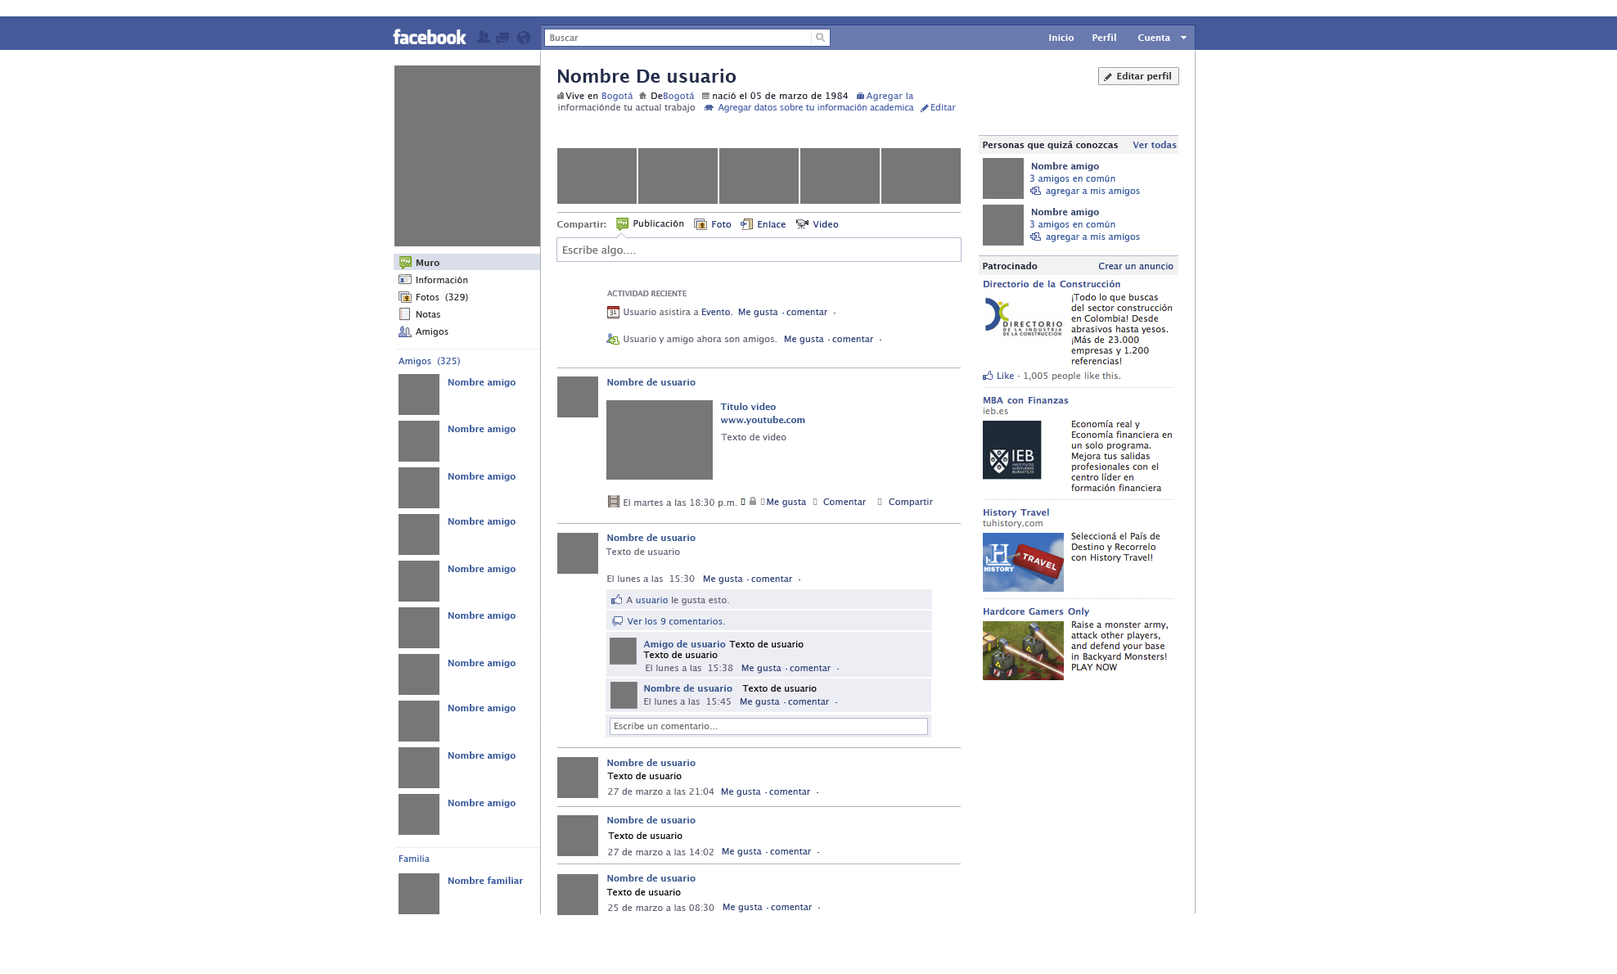
<style>
.page{position:relative;width:1617px;height:974px;background:#ffffff}
.page>*{position:absolute;margin:0}
.t1{font:9px "LucidaGrande";color:#777777}
.t2{font:9px "LucidaGrande-Bold";color:#ffffff}
.t3{font:18px "LucidaGrande-Bold";color:#242d49}
.t4{font:9px "LucidaGrande-Bold";color:#363636}
.t5{font:9.4px "LucidaGrande";color:#262a36}
.t6{font:9.4px "LucidaGrande";color:#5268ad}
.t7{font:8.6px "LucidaGrande";color:#5268ad}
.t8{font:9px "LucidaGrande";color:#666676}
.t9{font:9px "LucidaGrande";color:#5268ad}
.t10{font:9px "LucidaGrande-Bold";color:#252a38}
.t11{font:9px "LucidaGrande-Bold";color:#425694}
.t12{font:9px "LucidaGrande-Bold";color:#354370}
.t13{font:9px "LucidaGrande";color:#38599c}
.t14{font:9px "LucidaGrande-Bold";color:#34416a}
.t15{font:9px "LucidaGrande-Bold";color:#727272}
.t16{font:9.4px "LucidaGrande";color:#253976}
.t17{font:10.4px "LucidaGrande";color:#717171}
.t18{font:9px/17.2px "LucidaGrande";color:#333333}
.t19{font:9px/17.2px "LucidaGrande-Bold";color:#333333}
.t20{font:9px "LucidaGrande";color:#253976}
.t21{font:7.1px "LucidaGrande-Bold";color:#7c7c88}
.t22{font:9px "LucidaGrande";color:#38487b}
.t23{font:9px "LucidaGrande-Bold";color:#38599c}
.t24{font:9px "LucidaGrande-Bold";color:#37548d}
.t25{font:9px "LucidaGrande";color:#3e5c97}
.t26{font:9px "LucidaGrande";color:#060606}
.t27{font:8.9px "LucidaGrande";color:#717171}
</style>
<div class="page">
<p class="t1" style="left:550px;top:34px;width:28px;height:8px">Buscar</p>
<p class="t2" style="left:1049px;top:34px;width:25px;height:7px">Inicio</p>
<p class="t2" style="left:1092px;top:34px;width:24px;height:7px">Perfil</p>
<p class="t2" style="left:1137px;top:34px;width:33px;height:7px">Cuenta</p>
<p class="t3" style="left:558px;top:69px;width:178px;height:14px">Nombre De usuario</p>
<p class="t4" style="left:1117px;top:72px;width:54px;height:9px">Editar perfil</p>
<p class="t5" style="left:565px;top:92px;width:348px;height:9px">Vive en <span class="t6">Bogotá</span>      De<span class="t6">Bogotá </span>     nació el 05 de marzo de 1984      <span class="t6">Agregar la</span></p>
<p class="t7" style="left:558px;top:103px;width:398px;height:10px"><span class="t8">informaciónde tu actual trabajo        </span>Agregar datos sobre tu información academica      <span class="t9">Editar</span></p>
<p class="t10" style="left:983px;top:141px;width:194px;height:9px">Personas que quizá conozcas     <span class="t11">Ver todas</span></p>
<p class="t12" style="left:1031px;top:162px;width:68px;height:9px">Nombre amigo</p>
<p class="t13" style="left:1030px;top:174px;width:85px;height:10px">3 amigos en común</p>
<p class="t13" style="left:1046px;top:187px;width:94px;height:9px">agregar a mis amigos</p>
<p class="t14" style="left:1031px;top:208px;width:68px;height:9px">Nombre amigo</p>
<p class="t15" style="left:556px;top:221px;width:50px;height:8px">Compartir:</p>
<p class="t5" style="left:633px;top:219px;width:51px;height:8px">Publicación</p>
<p class="t16" style="left:712px;top:221px;width:19px;height:6px">Foto</p>
<p class="t16" style="left:758px;top:221px;width:27px;height:7px">Enlace</p>
<p class="t16" style="left:812px;top:220px;width:27px;height:7px">Video</p>
<p class="t13" style="left:1030px;top:220px;width:85px;height:10px">3 amigos en común</p>
<p class="t13" style="left:1046px;top:233px;width:94px;height:9px">agregar a mis amigos</p>
<p class="t17" style="left:563px;top:245px;width:73px;height:11px">Escribe algo....</p>
<p class="t18" style="left:416px;top:259px;width:52px;height:78px"><span class="t19"><br>Muro<br></span>Información<br>Fotos  (329)<br>Notas<br>Amigos</p>
<p class="t10" style="left:983px;top:262px;width:54px;height:7px">Patrocinado</p>
<p class="t20" style="left:1098px;top:263px;width:75px;height:7px">Crear un anuncio</p>
<p class="t21" style="left:607px;top:290px;width:79px;height:6px">ACTIVIDAD RECIENTE</p>
<p class="t8" style="left:623px;top:308px;width:109px;height:7px">Usuario asistira a <span class="t22">Evento.</span></p>
<p class="t22" style="left:738px;top:308px;width:90px;height:9px">Me gusta   comentar</p>
<p class="t8" style="left:623px;top:335px;width:153px;height:9px">Usuario y amigo ahora son amigos.</p>
<p class="t22" style="left:784px;top:335px;width:90px;height:9px">Me gusta   comentar</p>
<p class="t13" style="left:398px;top:357px;width:62px;height:10px">Amigos  (325)</p>
<p class="t23" style="left:448px;top:378px;width:67px;height:9px">Nombre amigo</p>
<p class="t24" style="left:607px;top:378px;width:88px;height:7px">Nombre de usuario</p>
<p class="t24" style="left:720px;top:403px;width:56px;height:7px">Titulo video</p>
<p class="t23" style="left:448px;top:425px;width:67px;height:9px">Nombre amigo</p>
<p class="t24" style="left:721px;top:416px;width:84px;height:9px">www.youtube.com</p>
<p class="t8" style="left:721px;top:433px;width:65px;height:7px">Texto de video</p>
<p class="t23" style="left:448px;top:472px;width:67px;height:9px">Nombre amigo</p>
<p class="t8" style="left:623px;top:498px;width:114px;height:9px">El martes a las 18:30 p.m.</p>
<p class="t22" style="left:767px;top:498px;width:166px;height:9px">Me gusta      Comentar        Compartir</p>
<p class="t23" style="left:448px;top:517px;width:67px;height:9px">Nombre amigo</p>
<p class="t24" style="left:607px;top:533px;width:88px;height:8px">Nombre de usuario</p>
<p class="t8" style="left:605px;top:547px;width:75px;height:8px">Texto de usuario</p>
<p class="t23" style="left:448px;top:565px;width:67px;height:9px">Nombre amigo</p>
<p class="t8" style="left:607px;top:574px;width:88px;height:8px">El lunes a las  15:30</p>
<p class="t22" style="left:703px;top:575px;width:90px;height:9px">Me gusta   comentar</p>
<p class="t8" style="left:626px;top:596px;width:103px;height:9px">A <span class="t25">usuario</span> le gusta esto.</p>
<p class="t23" style="left:448px;top:611px;width:67px;height:9px">Nombre amigo</p>
<p class="t25" style="left:627px;top:618px;width:98px;height:7px">Ver los 9 comentarios.</p>
<p class="t24" style="left:643px;top:640px;width:83px;height:9px">Amigo de usuario</p>
<p class="t26" style="left:729px;top:640px;width:74px;height:7px">Texto de usuario</p>
<p class="t26" style="left:643px;top:650px;width:75px;height:8px">Texto de usuario</p>
<p class="t23" style="left:448px;top:659px;width:67px;height:9px">Nombre amigo</p>
<p class="t8" style="left:646px;top:664px;width:87px;height:7px">El lunes a las  15:38</p>
<p class="t22" style="left:741px;top:664px;width:90px;height:9px">Me gusta   comentar</p>
<p class="t24" style="left:644px;top:684px;width:88px;height:7px">Nombre de usuario</p>
<p class="t26" style="left:742px;top:684px;width:75px;height:7px">Texto de usuario</p>
<p class="t8" style="left:644px;top:697px;width:87px;height:7px">El lunes a las  15:45</p>
<p class="t22" style="left:740px;top:698px;width:90px;height:9px">Me gusta   comentar</p>
<p class="t23" style="left:448px;top:704px;width:67px;height:9px">Nombre amigo</p>
<p class="t27" style="left:614px;top:722px;width:104px;height:8px">Escribe un comentario...</p>
<p class="t23" style="left:448px;top:751px;width:67px;height:9px">Nombre amigo</p>
<p class="t24" style="left:607px;top:758px;width:88px;height:8px">Nombre de usuario</p>
<p class="t26" style="left:607px;top:772px;width:75px;height:7px">Texto de usuario</p>
<p class="t8" style="left:608px;top:787px;width:106px;height:8px">27 de marzo a las 21:04</p>
<p class="t22" style="left:721px;top:788px;width:90px;height:9px">Me gusta   comentar</p>
<p class="t23" style="left:448px;top:799px;width:67px;height:9px">Nombre amigo</p>
<p class="t24" style="left:607px;top:816px;width:88px;height:7px">Nombre de usuario</p>
<p class="t26" style="left:608px;top:831px;width:74px;height:8px">Texto de usuario</p>
<p class="t13" style="left:398px;top:855px;width:32px;height:7px">Familia</p>
<p class="t8" style="left:608px;top:848px;width:105px;height:8px">27 de marzo a las 14:02</p>
<p class="t22" style="left:722px;top:848px;width:90px;height:9px">Me gusta   comentar</p>
<p class="t23" style="left:448px;top:876px;width:76px;height:8px">Nombre familiar</p>
<p class="t24" style="left:607px;top:874px;width:88px;height:7px">Nombre de usuario</p>
<p class="t26" style="left:606px;top:888px;width:75px;height:7px">Texto de usuario</p>
<p class="t8" style="left:608px;top:903px;width:106px;height:8px">25 de marzo a las 08:30</p>
<p class="t22" style="left:722px;top:903px;width:90px;height:9px">Me gusta   comentar</p>
</div>
